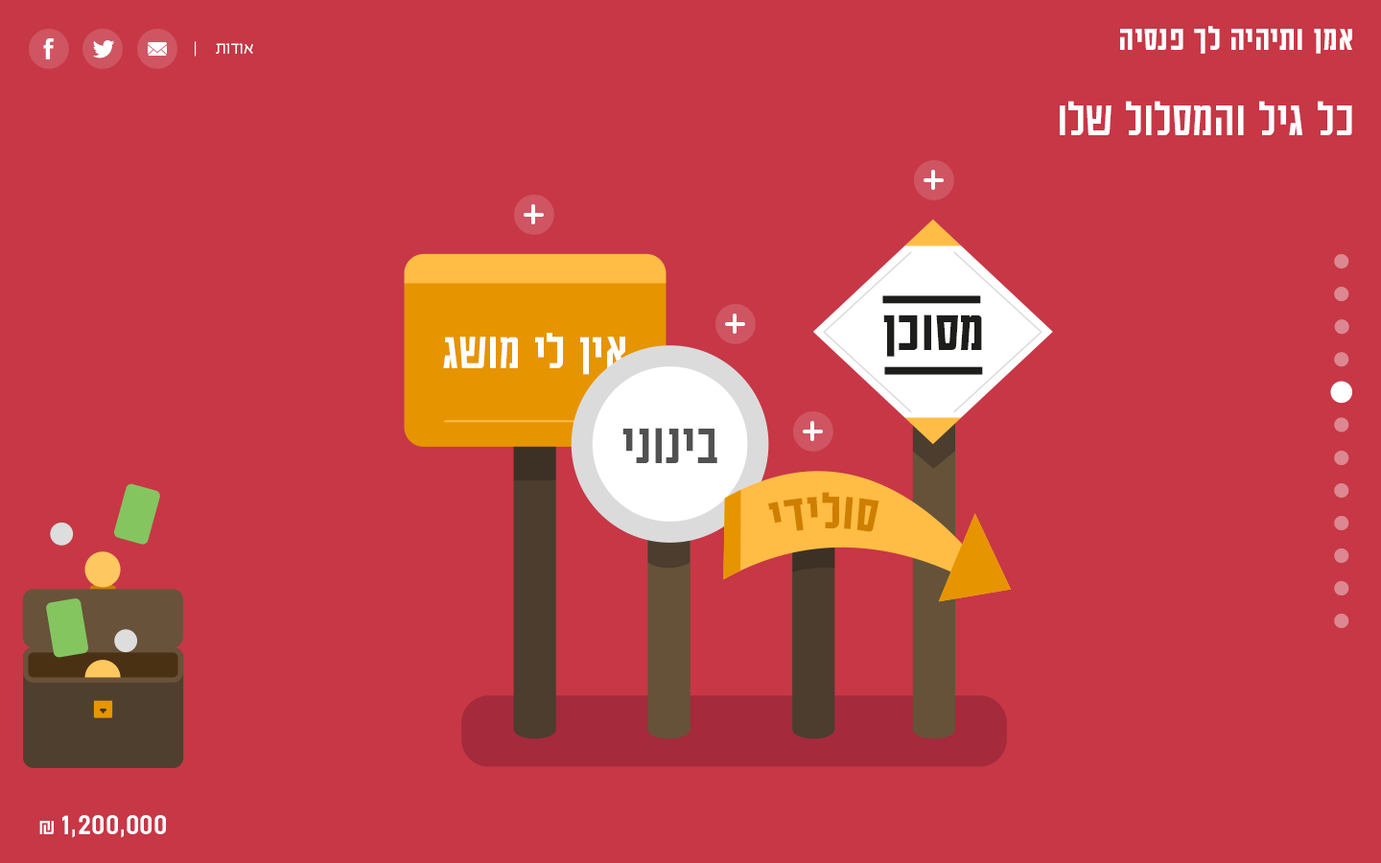
<style>
.page{position:relative;width:1381px;height:863px;background:#c73746}
.page>*{position:absolute;margin:0}
.t1{font:37.8px "AdumaFOT-Medium";color:#ffffff}
.t2{font:19.2px "EzerBlock_OE-Light";color:#ffffff}
.t3{font:53.8px "AdumaFOT-Regular";color:#ffffff}
.t4{font:63.2px "AdumaFOT-Medium";color:#1d1d1b}
.t5{font:56.6px "AdumaFOT-Regular";color:#ffffff}
.t6{font:63.2px "AdumaFOT-Regular";color:#515151}
.t7{font:57.6px "AdumaFOT-Medium";color:#ce7f00}
.t8{font:33.6px "AdumaFOT-Regular";color:#ffffff}
.t9{font:24px "AdumaFOT-Regular";color:#ffffff}
</style>
<div class="page">
<p class="t1" style="left:1120px;top:26px;width:232px;height:28px">אמן ותיהיה לך פנסיה</p>
<p class="t2" style="left:195px;top:41px;width:58px;height:16px">אודות     |</p>
<p class="t3" style="left:1060px;top:101px;width:292px;height:34px">כל גיל והמסלול שלו</p>
<p class="t4" style="left:883px;top:315px;width:99px;height:42px">מסוכן</p>
<p class="t5" style="left:443px;top:333px;width:182px;height:42px">אין לי מושג</p>
<p class="t6" style="left:623px;top:428px;width:94px;height:35px">בינוני</p>
<p class="t7" style="left:768px;top:492px;width:112px;height:40px">סולידי</p>
<p class="t8" style="left:39px;top:815px;width:127px;height:23px">1,200,000<span class="t9"> ₪</span></p>
</div>
